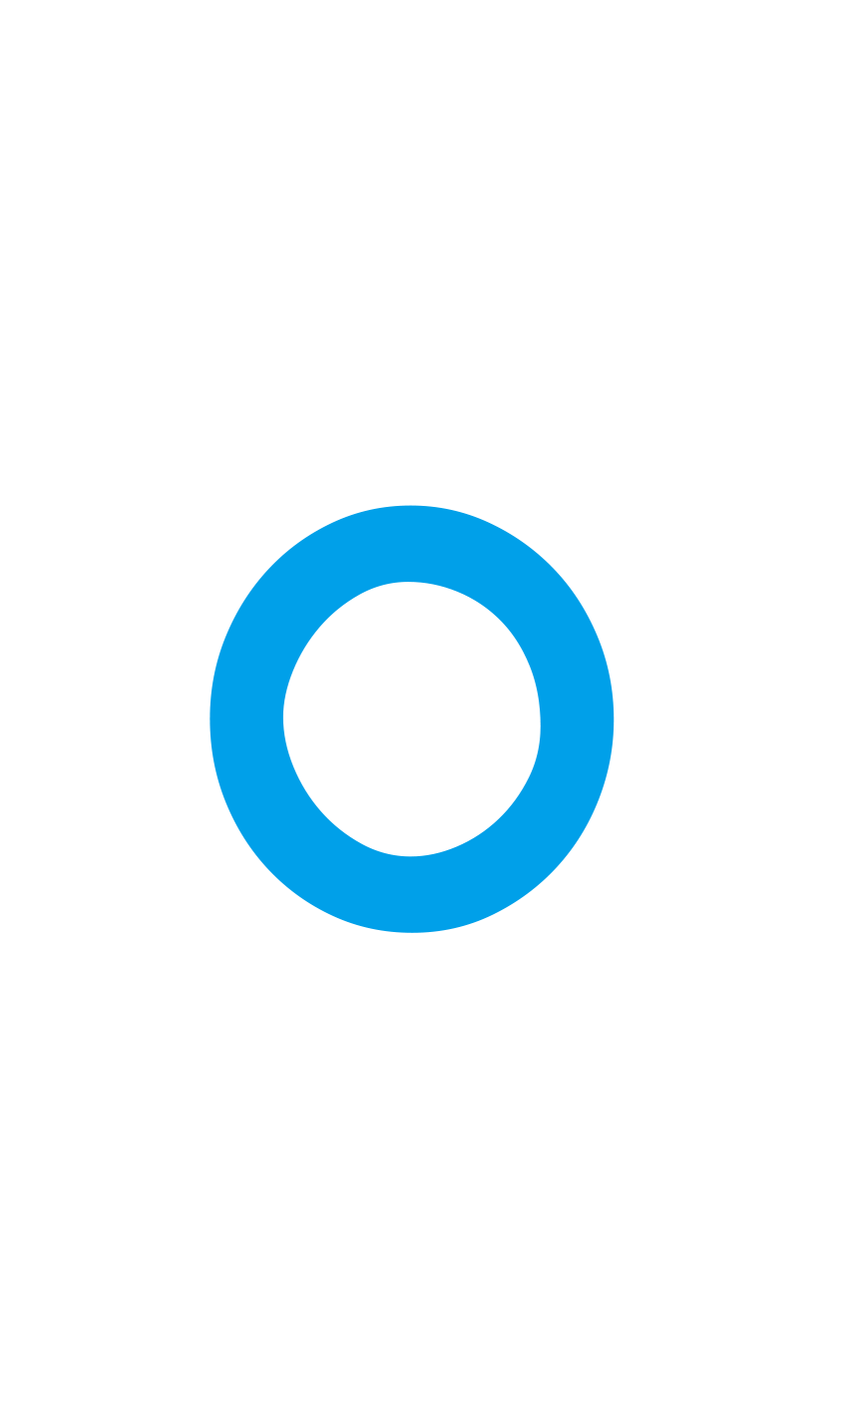
<style>
.page{position:relative;width:843px;height:1414px;background:#ffffff}
.page>*{position:absolute;margin:0}
.t1{font:1679.9px "MicrosoftYaHeiUILight";color:#00a0e9;scale:0.96 1}
</style>
<div class="page">
<p class="t1" style="left:210px;top:505px;width:405px;height:428px">。</p>
</div>
